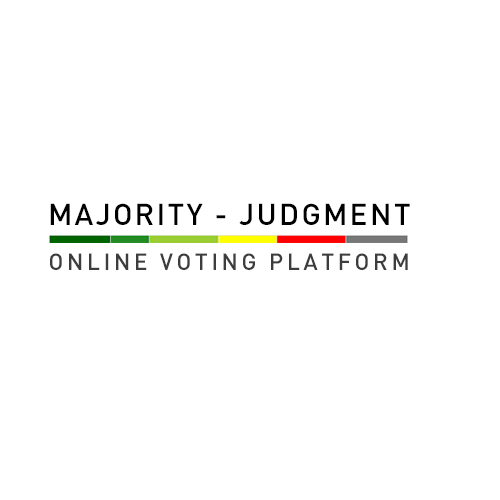
<style>
.page{position:relative;width:500px;height:500px;background:#ffffff}
.page>*{position:absolute;margin:0}
.t1{font:30px "DIN-Medium";letter-spacing:0.075em;color:#000000;text-transform:uppercase}
.t2{font:23px "DIN-Medium";letter-spacing:0.15em;color:#3d3d3d;text-transform:uppercase}
</style>
<div class="page">
<p class="t1" style="left:50px;top:203px;width:360px;height:22px">MAJORITY - JUDGMENT</p>
<p class="t2" style="left:50px;top:253px;width:358px;height:17px">online voting platform</p>
</div>
